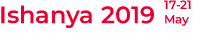
<style>
.page{position:relative;width:220px;height:40px;background:#ffffff}
.page>*{position:absolute;margin:0}
.t1{font:24px "Montserrat-SemiBold";color:#e80033}
.t2{font:12px "Montserrat-SemiBold";color:#e80033}
</style>
<div class="page">
<p class="t1" style="left:1px;top:5px;width:153px;height:24px">Ishanya 2019</p>
<p class="t2" style="left:164px;top:0px;width:27px;height:26px">17-21<br>May</p>
</div>
